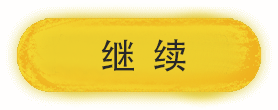
<style>
.page{position:relative;width:278px;height:110px}
.page>*{position:absolute;margin:0}
.t1{font:36px "AdobeHeitiStd-Regular";color:#282828}
</style>
<div class="page">
<p class="t1" style="left:101px;top:39px;width:85px;height:33px">继  续</p>
</div>
